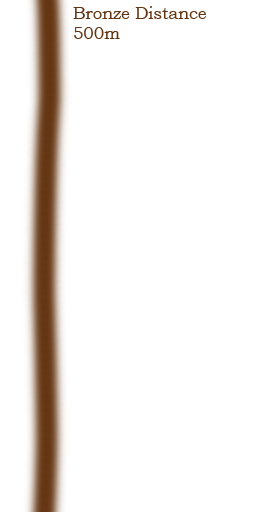
<style>
.page{position:relative;width:256px;height:512px;background:#ffffff}
.page>*{position:absolute;margin:0}
.t1{font:16.7px "BookmanOldStyle";color:#643512}
</style>
<div class="page">
<p class="t1" style="left:73px;top:6px;width:133px;height:33px">Bronze Distance<br>500m</p>
</div>
